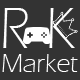
<style>
.page{position:relative;width:80px;height:80px;background:#333333}
.page>*{position:absolute;margin:0}
.t1{font:60px "ErasITC-Light";color:#ffffff}
.t2{font:27px "ErasITC-Light";color:#ffffff}
</style>
<div class="page">
<p class="t1" style="left:3px;top:8px;width:72px;height:40px">R K</p>
<p class="t2" style="left:2px;top:54px;width:76px;height:18px">Market</p>
</div>
